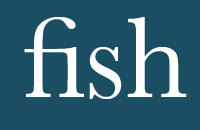
<style>
.page{position:relative;width:200px;height:130px;background:#1c4e63}
.page>*{position:absolute;margin:0}
.t1{font:120px "Baskerville";color:#ffffff}
</style>
<div class="page">
<p class="t1" style="left:24px;top:17px;width:163px;height:82px">ﬁsh</p>
</div>
